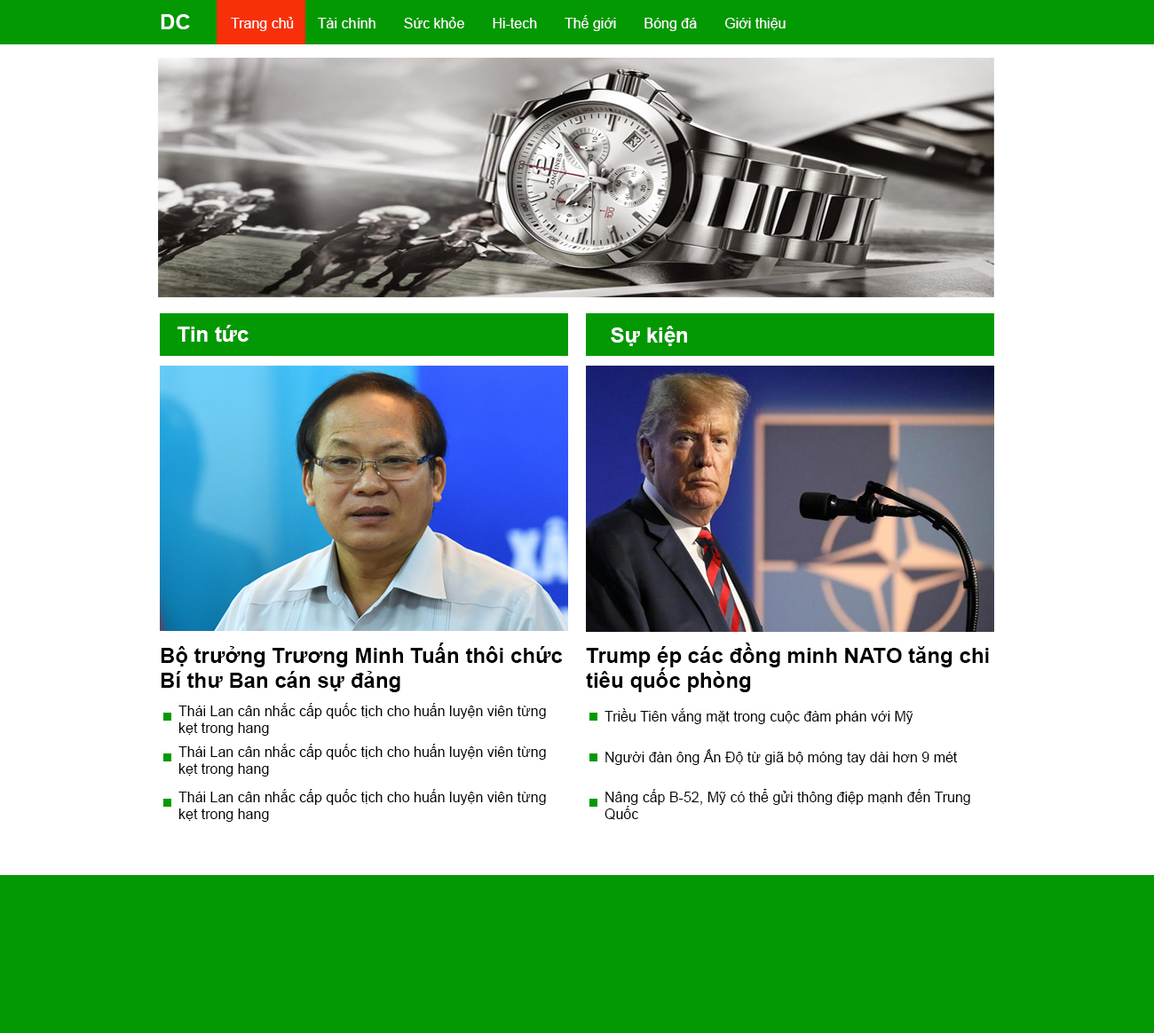
<style>
.page{position:relative;width:1154px;height:1033px;background:#ffffff}
.page>*{position:absolute;margin:0}
.t1{font:21.3px "Arial-BoldMT";color:#fdfafa}
.t2{font:14.2px "ArialMT";color:#fdfafa}
.t3{font:21.3px "Arial-BoldMT";color:#ffffff}
.t4{font:21.3px "Arial-BoldMT";color:#000000}
.t5{font:14.2px "ArialMT";color:#000000}
</style>
<div class="page">
<p class="t1" style="left:161px;top:14px;width:29px;height:15px">DC</p>
<p class="t2" style="left:231px;top:15px;width:555px;height:16px">Trang chủ      Tài chính       Sức khỏe       Hi-tech       Thế giới       Bóng đá       Giới thiệu</p>
<p class="t3" style="left:178px;top:325px;width:71px;height:17px">Tin tức</p>
<p class="t3" style="left:611px;top:326px;width:76px;height:20px">Sự kiện</p>
<p class="t4" style="left:161px;top:643px;width:402px;height:49px">Bộ trưởng Trương Minh Tuấn thôi chức <br>Bí thư Ban cán sự đảng</p>
<p class="t4" style="left:586px;top:643px;width:403px;height:49px">Trump ép các đồng minh NATO tăng chi <br>tiêu quốc phòng</p>
<p class="t5" style="left:178px;top:703px;width:368px;height:33px">Thái Lan cân nhắc cấp quốc tịch cho huấn luyện viên từng <br>kẹt trong hang</p>
<p class="t5" style="left:605px;top:708px;width:308px;height:16px">Triều Tiên vắng mặt trong cuộc đàm phán với Mỹ</p>
<p class="t5" style="left:178px;top:744px;width:368px;height:33px">Thái Lan cân nhắc cấp quốc tịch cho huấn luyện viên từng <br>kẹt trong hang</p>
<p class="t5" style="left:605px;top:749px;width:353px;height:16px">Người đàn ông Ấn Độ từ giã bộ móng tay dài hơn 9 mét</p>
<p class="t5" style="left:178px;top:789px;width:368px;height:33px">Thái Lan cân nhắc cấp quốc tịch cho huấn luyện viên từng <br>kẹt trong hang</p>
<p class="t5" style="left:605px;top:789px;width:365px;height:31px">Nâng cấp B-52, Mỹ có thể gửi thông điệp mạnh đến Trung <br>Quốc</p>
</div>
